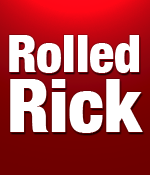
<style>
.page{position:relative;width:150px;height:175px;background:#ffffff}
.page>*{position:absolute;margin:0}
.t1{font:52px/58px "HelveticaNeue-CondensedBlack";color:#ffffff}
.t2{font:74px/60px "HelveticaNeue-CondensedBlack";color:#ffffff}
</style>
<div class="page">
<p class="t1" style="left:9px;top:35px;width:134px;height:98px;text-align:center">Rolled<br><span class="t2">Rick</span></p>
</div>
